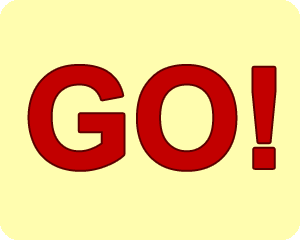
<style>
.page{position:relative;width:300px;height:240px;background:#fffdaf}
.page>*{position:absolute;margin:0}
.t1{font:140px "Arial-BoldMT";color:#c20000}
</style>
<div class="page">
<p class="t1" style="left:29px;top:66px;width:246px;height:104px">GO!</p>
</div>
